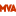
<style>
.page{position:relative;width:16px;height:16px;background:#ffffff}
.page>*{position:absolute;margin:0}
.t1{font:10px "IntroCondBlackFree";color:#cc3300}
</style>
<div class="page">
<p class="t1" style="left:0px;top:4px;width:17px;height:8px">MVA</p>
</div>
